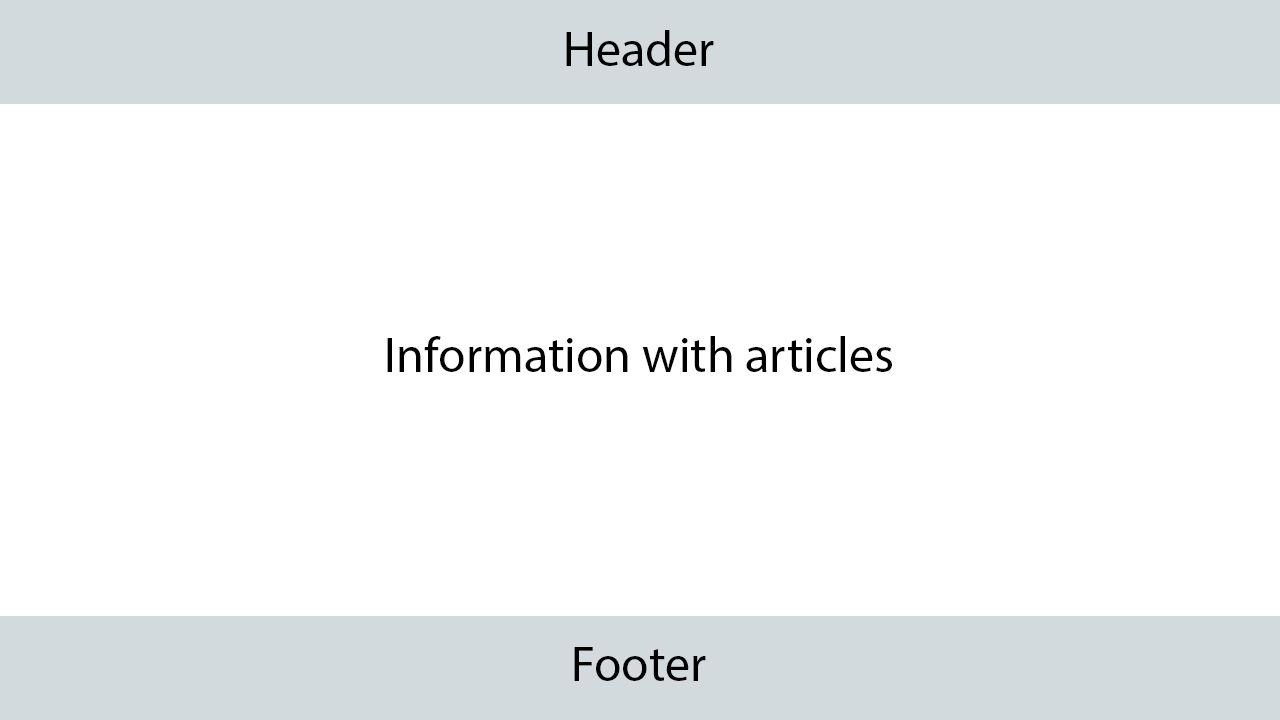
<style>
.page{position:relative;width:1280px;height:720px;background:#ffffff}
.page>*{position:absolute;margin:0}
.t1{font:50px "MyriadPro-Regular";color:#000000}
</style>
<div class="page">
<p class="t1" style="left:566px;top:30px;width:148px;height:36px">Header</p>
<p class="t1" style="left:387px;top:336px;width:505px;height:36px">Information with articles</p>
<p class="t1" style="left:574px;top:647px;width:132px;height:34px">Footer</p>
</div>
